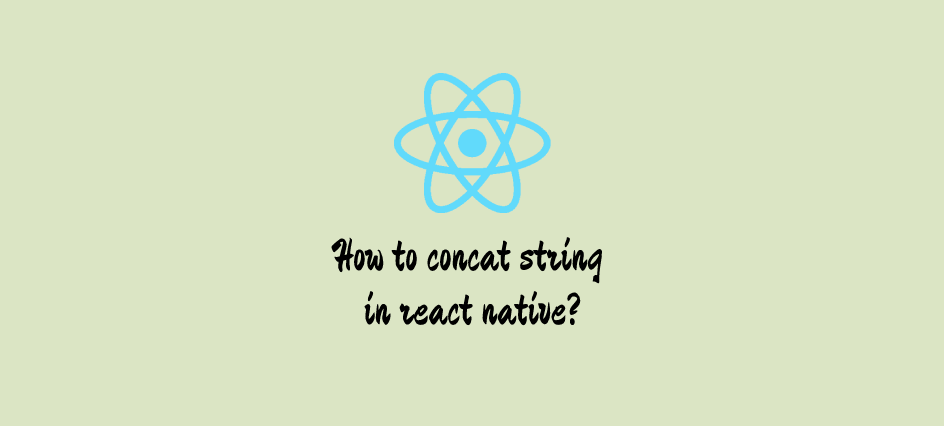
<style>
.page{position:relative;width:944px;height:426px;background:#dbe5c4}
.page>*{position:absolute;margin:0}
.t1{font:45px "Devonshire-Regular";color:#000000}
</style>
<div class="page">
<p class="t1" style="left:331px;top:237px;width:272px;height:89px;text-align:center">How to concat string <br>in react native?</p>
</div>
